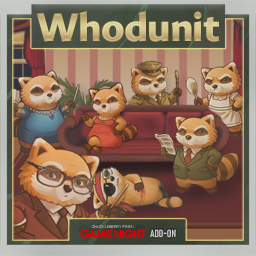
<style>
.page{position:relative;width:256px;height:256px}
.page>*{position:absolute;margin:0}
.t1{font:40px "GuyotSans-ExtraBold";letter-spacing:-0.025em;color:#cebd88}
.t2{font:3.7px "Verdana"}
.t3{font:10.3px "Bahnschrift-SemiBoldCondensed";color:#cfcfcf}
</style>
<div class="page">
<p class="t1" style="left:36px;top:11px;width:184px;height:31px">Whodunit</p>
<p class="t2" style="left:91px;top:225px;width:44px;height:3px">CHUCKLEBERRY FINN’s</p>
<p class="t3" style="left:150px;top:229px;width:26px;height:8px">ADD-ON</p>
</div>
